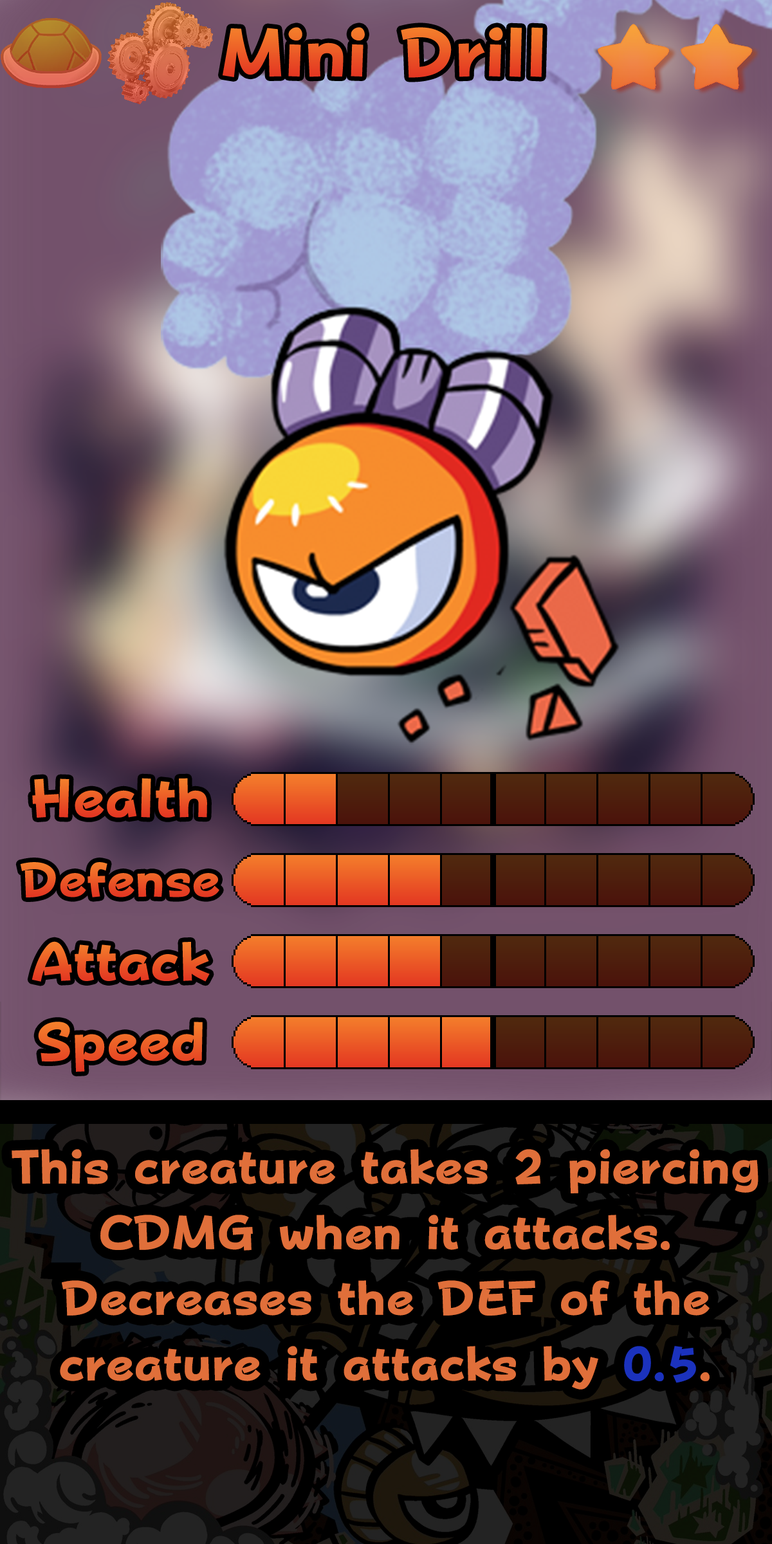
<style>
.page{position:relative;width:772px;height:1544px}
.page>*{position:absolute;margin:0}
.t1{font:117.1px "FOTPopHappinessStrp-ExtraBold"}
.t2{font:92.7px "FOTPopHappinessStrp-ExtraBold"}
.t3{font:82.4px "FOTPopHappinessStrp-ExtraBold"}
.t4{font:92.7px "FOTPopHappinessStrp-ExtraBold";color:#ec5c27}
.t5{font:81.7px/65.6px "FOTPopHappinessStrp-ExtraBold";color:#e06f3a}
.t6{font:81.7px/65.6px "FOTPopHappinessStrp-ExtraBold";color:#1b32bd}
</style>
<div class="page">
<p class="t1" style="left:223px;top:27px;width:320px;height:51px">Mini Drill</p>
<p class="t2" style="left:32px;top:778px;width:175px;height:40px">Health</p>
<p class="t3" style="left:20px;top:862px;width:199px;height:36px">Defense</p>
<p class="t2" style="left:32px;top:941px;width:178px;height:41px">Attack</p>
<p class="t4" style="left:38px;top:1022px;width:165px;height:50px">Speed</p>
<p class="t5" style="left:12px;top:1149px;width:747px;height:241px;text-align:center">This creature takes 2 piercing CDMG when it attacks. <br>Decreases the DEF of the creature it attacks by <span class="t6">0.5</span>.</p>
</div>
